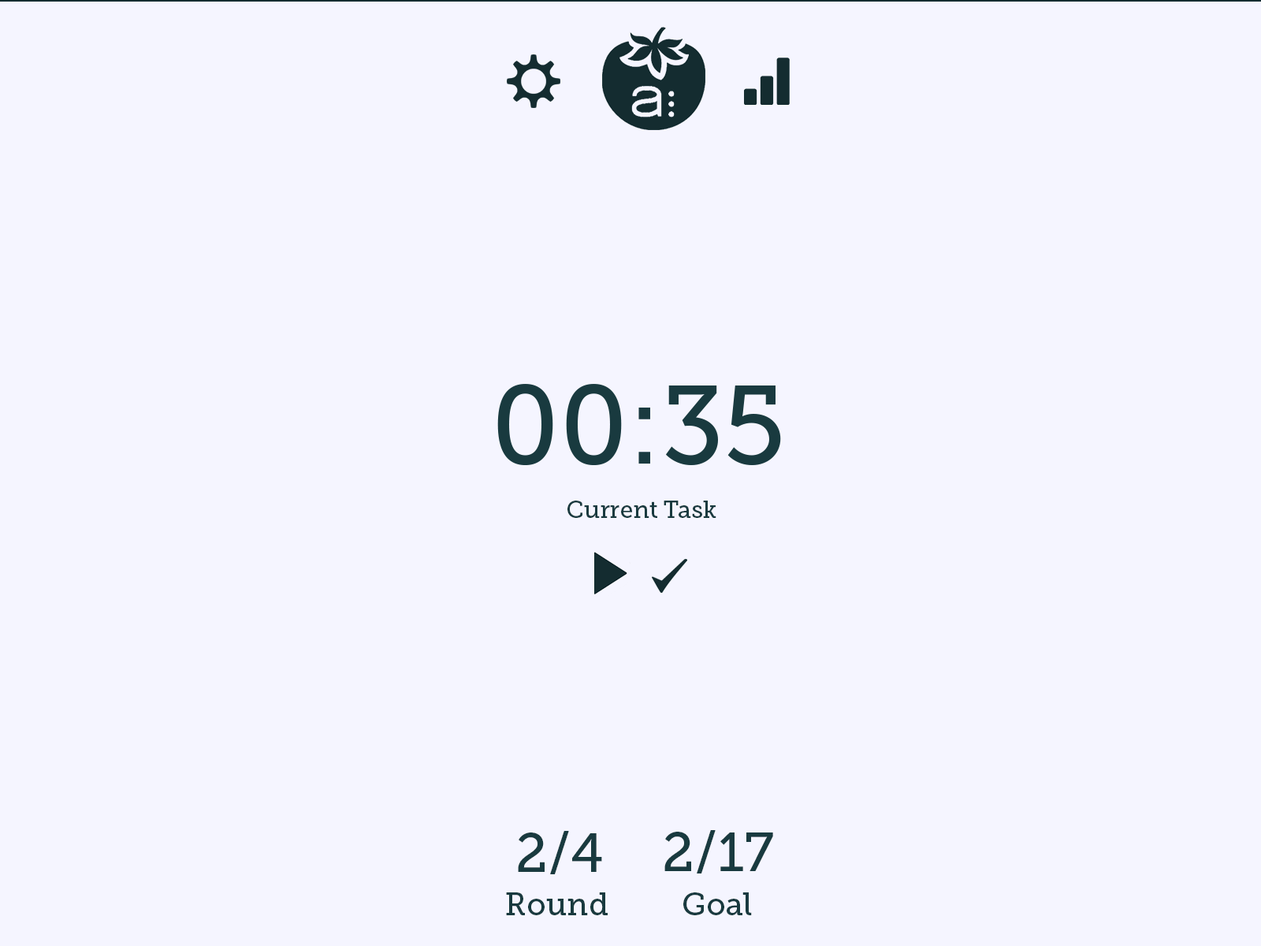
<style>
.page{position:relative;width:1261px;height:946px;background:#f5f5ff}
.page>*{position:absolute;margin:0}
.t1{font:23.6px "MuseoSlab-500";color:#193a3f}
.t2{font:55.2px "MuseoSlab-500";color:#193a3f}
.t3{font:31.5px "MuseoSlab-500";color:#193a3f}
</style>
<div class="page">
<p class="t1" style="left:567px;top:500px;width:149px;height:18px">Current Task</p>
<p class="t2" style="left:518px;top:831px;width:84px;height:43px">2/4</p>
<p class="t2" style="left:664px;top:830px;width:109px;height:43px">2/17</p>
<p class="t3" style="left:506px;top:892px;width:102px;height:23px">Round</p>
<p class="t3" style="left:683px;top:892px;width:69px;height:23px">Goal</p>
</div>
